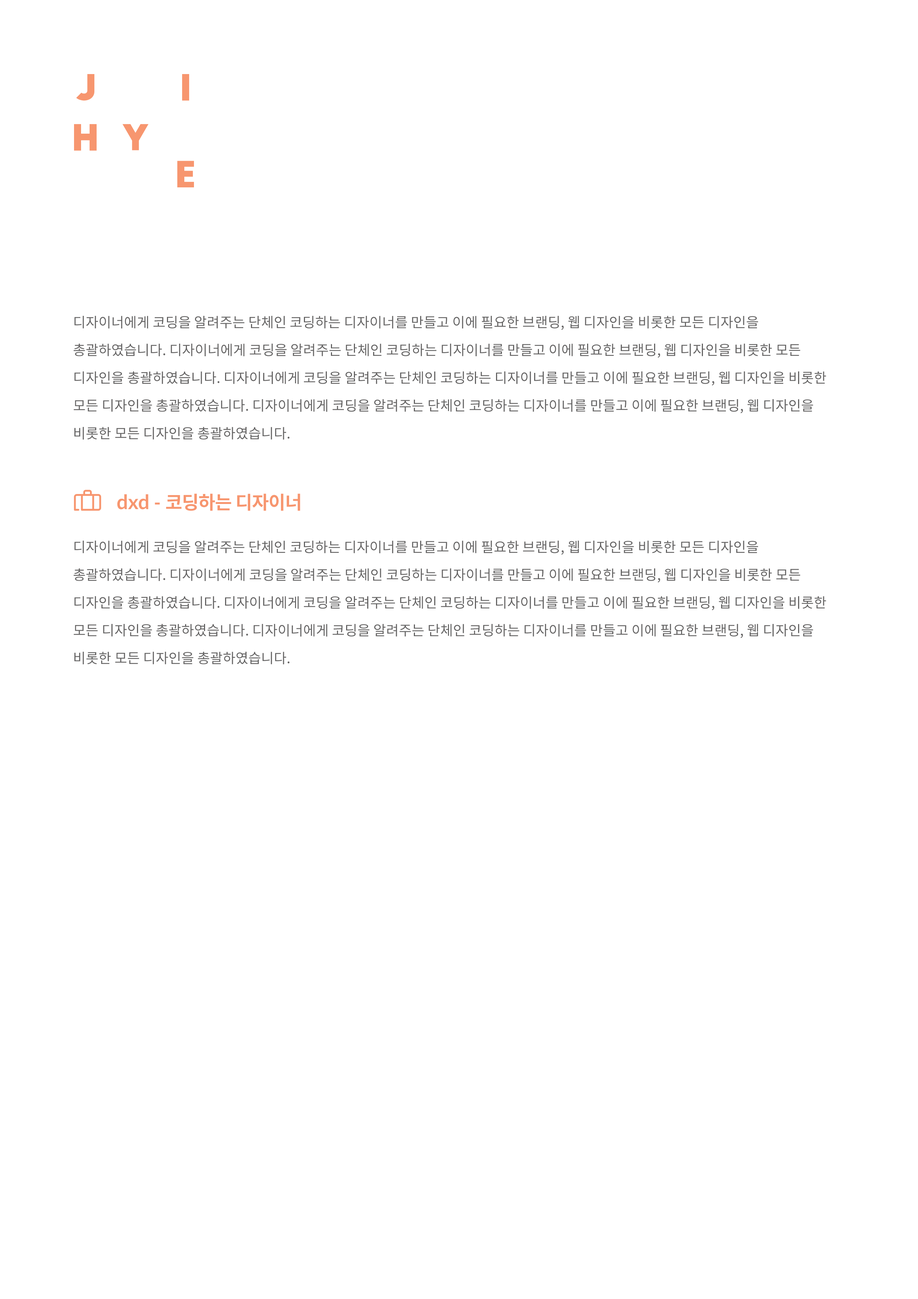
<style>
.page{position:relative;width:918px;height:1299px;background:#ffffff}
.page>*{position:absolute;margin:0}
.t1{font:13.9px/27.8px "NotoSansKR-Regular";color:#636262}
.t2{font:18.5px "NotoSansKR-Bold";letter-spacing:-0.025em;color:#f7966f}
.t3{font:20.1px "Lato-Bold";color:#f7966f}
.t4{font:18.5px "Lato-Bold";color:#f7966f}
</style>
<div class="page">
<p class="t1" style="left:74px;top:316px;width:752px;height:123px">디자이너에게 코딩을 알려주는 단체인 코딩하는 디자이너를 만들고 이에 필요한 브랜딩, 웹 디자인을 비롯한 모든 디자인을<br>총괄하였습니다. 디자이너에게 코딩을 알려주는 단체인 코딩하는 디자이너를 만들고 이에 필요한 브랜딩, 웹 디자인을 비롯한 모든<br>디자인을 총괄하였습니다. 디자이너에게 코딩을 알려주는 단체인 코딩하는 디자이너를 만들고 이에 필요한 브랜딩, 웹 디자인을 비롯한<br>모든 디자인을 총괄하였습니다. 디자이너에게 코딩을 알려주는 단체인 코딩하는 디자이너를 만들고 이에 필요한 브랜딩, 웹 디자인을<br>비롯한 모든 디자인을 총괄하였습니다.</p>
<p class="t2" style="left:117px;top:494px;width:183px;height:17px"><span class="t3">dxd</span><span class="t4"> - </span>코딩하는 디자이너</p>
<p class="t1" style="left:74px;top:541px;width:752px;height:123px">디자이너에게 코딩을 알려주는 단체인 코딩하는 디자이너를 만들고 이에 필요한 브랜딩, 웹 디자인을 비롯한 모든 디자인을<br>총괄하였습니다. 디자이너에게 코딩을 알려주는 단체인 코딩하는 디자이너를 만들고 이에 필요한 브랜딩, 웹 디자인을 비롯한 모든<br>디자인을 총괄하였습니다. 디자이너에게 코딩을 알려주는 단체인 코딩하는 디자이너를 만들고 이에 필요한 브랜딩, 웹 디자인을 비롯한<br>모든 디자인을 총괄하였습니다. 디자이너에게 코딩을 알려주는 단체인 코딩하는 디자이너를 만들고 이에 필요한 브랜딩, 웹 디자인을<br>비롯한 모든 디자인을 총괄하였습니다.</p>
</div>
